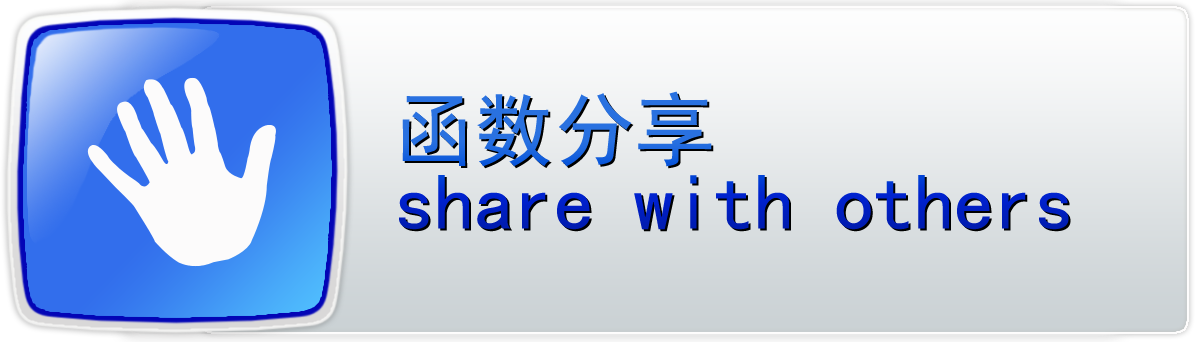
<style>
.page{position:relative;width:1196px;height:342px}
.page>*{position:absolute;margin:0}
.t1{font:80px/72px "SimHei"}
</style>
<div class="page">
<p class="t1" style="left:399px;top:91px;width:670px;height:139px">函数分享<br>share with others</p>
</div>
